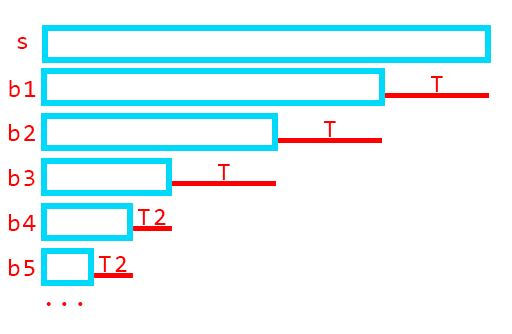
<style>
.page{position:relative;width:512px;height:334px;background:#ffffff}
.page>*{position:absolute;margin:0}
.t1{font:25px "Consolas";letter-spacing:0.08em;color:#ff0000}
</style>
<div class="page">
<p class="t1" style="left:17px;top:37px;width:11px;height:12px">s</p>
<p class="t1" style="left:430px;top:76px;width:13px;height:16px">T</p>
<p class="t1" style="left:9px;top:80px;width:27px;height:17px">b1</p>
<p class="t1" style="left:8px;top:124px;width:27px;height:17px">b2</p>
<p class="t1" style="left:323px;top:121px;width:13px;height:16px">T</p>
<p class="t1" style="left:8px;top:169px;width:27px;height:17px">b3</p>
<p class="t1" style="left:217px;top:164px;width:13px;height:16px">T</p>
<p class="t1" style="left:137px;top:209px;width:29px;height:16px">T2</p>
<p class="t1" style="left:8px;top:214px;width:28px;height:17px">b4</p>
<p class="t1" style="left:98px;top:256px;width:29px;height:16px">T2</p>
<p class="t1" style="left:8px;top:259px;width:27px;height:17px">b5</p>
<p class="t1" style="left:46px;top:302px;width:37px;height:4px">...</p>
</div>
